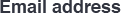
<style>
.page{position:relative;width:123px;height:15px;background:#ffffff}
.page>*{position:absolute;margin:0}
.t1{font:18px "Helvetica-Bold";color:#31343f}
</style>
<div class="page">
<p class="t1" style="left:0px;top:0px;width:121px;height:13px">Email address</p>
</div>
